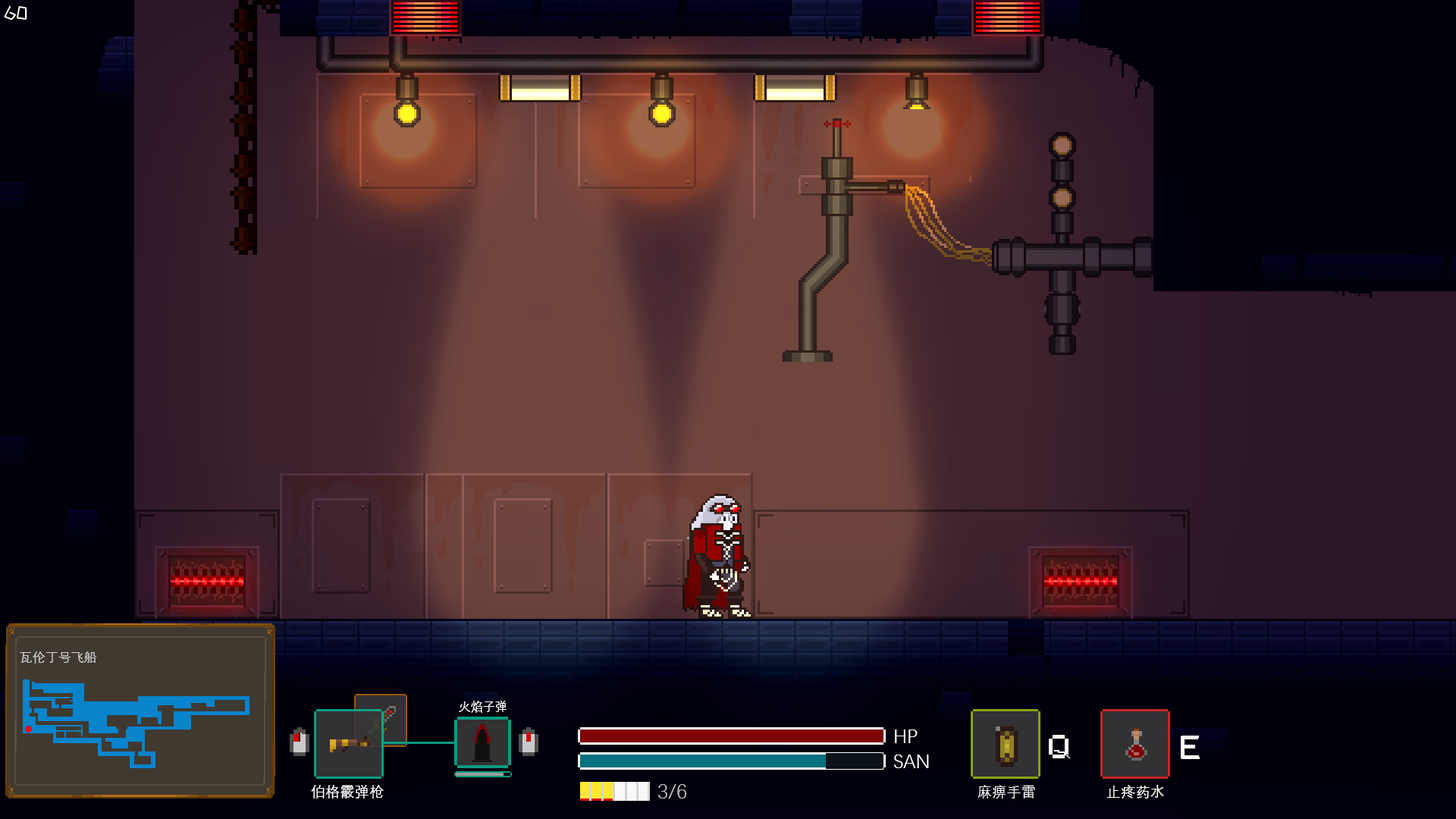
<style>
.page{position:relative;width:1456px;height:819px}
.page>*{position:absolute;margin:0}
.t1{font:12.9px "DengXian";color:#d5d5d5}
.t2{font:12.1px "DengXian";color:#ffffff}
.t3{font:19.9px "DengXian";color:#ffffff}
.t4{font:19.5px "DengXian";color:#ffffff}
.t5{font:14.7px "DengXian";color:#ffffff}
.t6{font:20.6px "DengXian";color:#c1c1c1}
</style>
<div class="page">
<p class="t1" style="left:20px;top:651px;width:77px;height:13px">瓦伦丁号飞船</p>
<p class="t2" style="left:459px;top:701px;width:48px;height:12px">火焰子弹</p>
<p class="t3" style="left:895px;top:730px;width:23px;height:13px">HP</p>
<p class="t4" style="left:894px;top:755px;width:35px;height:13px">SAN</p>
<p class="t5" style="left:311px;top:785px;width:73px;height:14px">伯格霰弹枪</p>
<p class="t6" style="left:658px;top:784px;width:28px;height:15px">3/6</p>
<p class="t5" style="left:977px;top:785px;width:58px;height:14px">麻痹手雷</p>
<p class="t5" style="left:1106px;top:785px;width:58px;height:14px">止疼药水</p>
</div>
